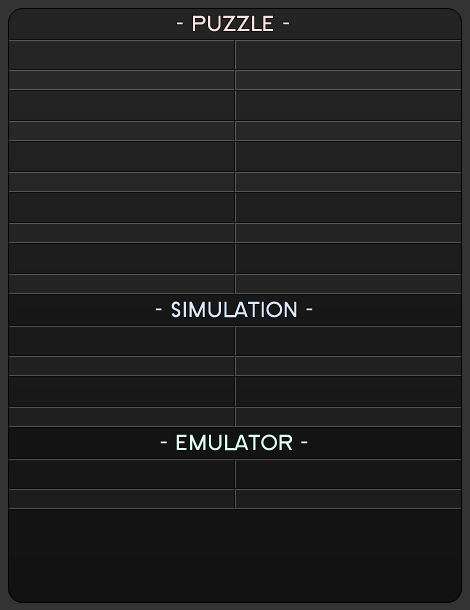
<style>
.page{position:relative;width:470px;height:610px}
.page>*{position:absolute;margin:0}
.t1{font:22.7px "SFNewRepublic";color:#ffe5e5}
.t2{font:22.7px "SFNewRepublic";color:#dfeeff}
.t3{font:22.7px "SFNewRepublic";color:#e2fff3}
</style>
<div class="page">
<p class="t1" style="left:177px;top:15px;width:112px;height:17px">- PUZZLE -</p>
<p class="t2" style="left:155px;top:301px;width:158px;height:17px">- SIMULATION -</p>
<p class="t3" style="left:160px;top:434px;width:148px;height:17px">- EMULATOR -</p>
</div>
